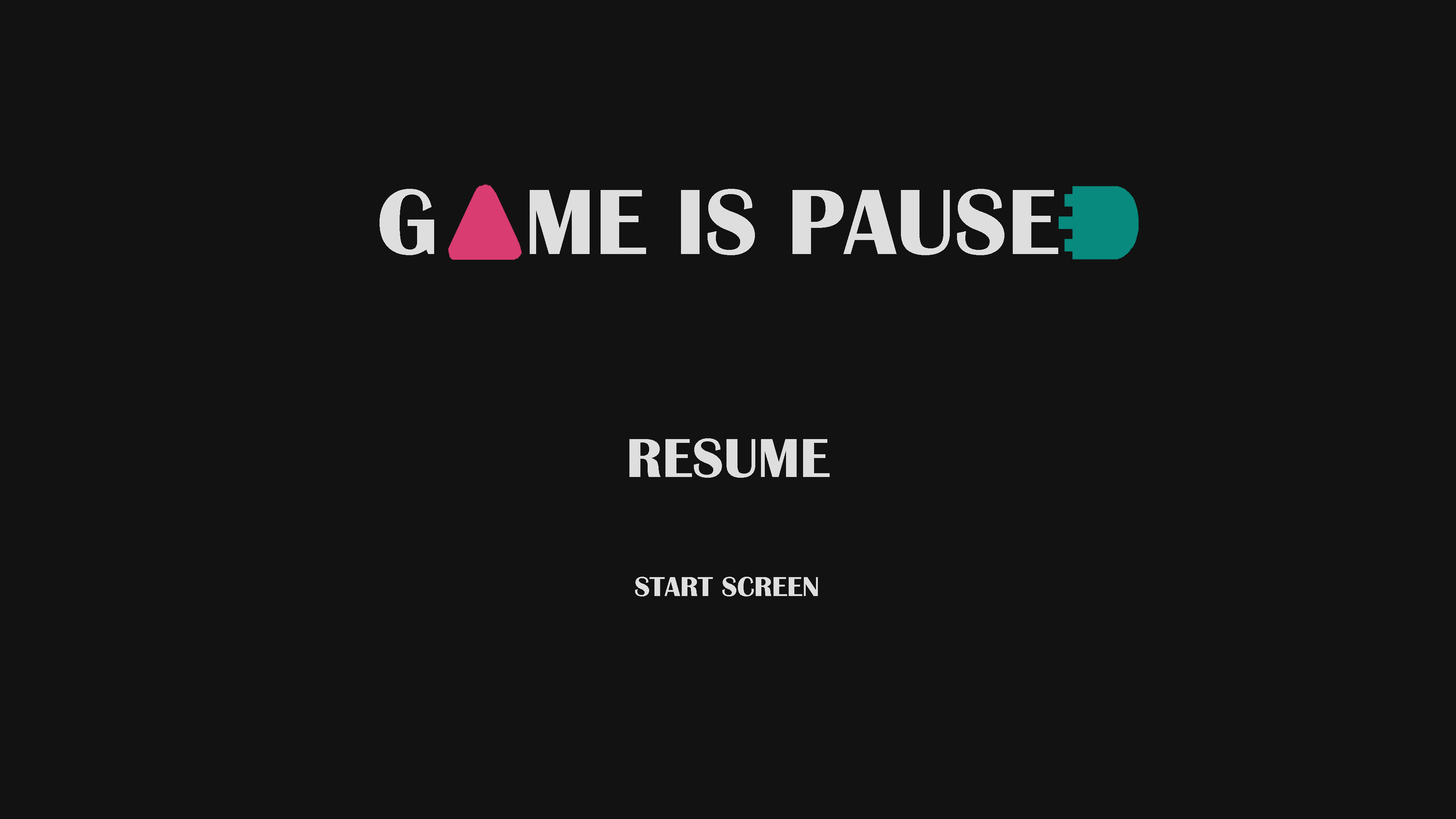
<style>
.page{position:relative;width:1456px;height:819px;background:#121212}
.page>*{position:absolute;margin:0}
.t1{font:96.2px "BritannicBold";color:#dedede}
.t2{font:56.9px "BritannicBold";color:#dedede}
.t3{font:28.4px "BritannicBold";color:#dedede}
</style>
<div class="page">
<p class="t1" style="left:380px;top:189px;width:678px;height:66px">G   ME IS PAUSE</p>
<p class="t2" style="left:629px;top:438px;width:201px;height:40px">RESUME</p>
<p class="t3" style="left:635px;top:577px;width:183px;height:19px">START SCREEN</p>
</div>
